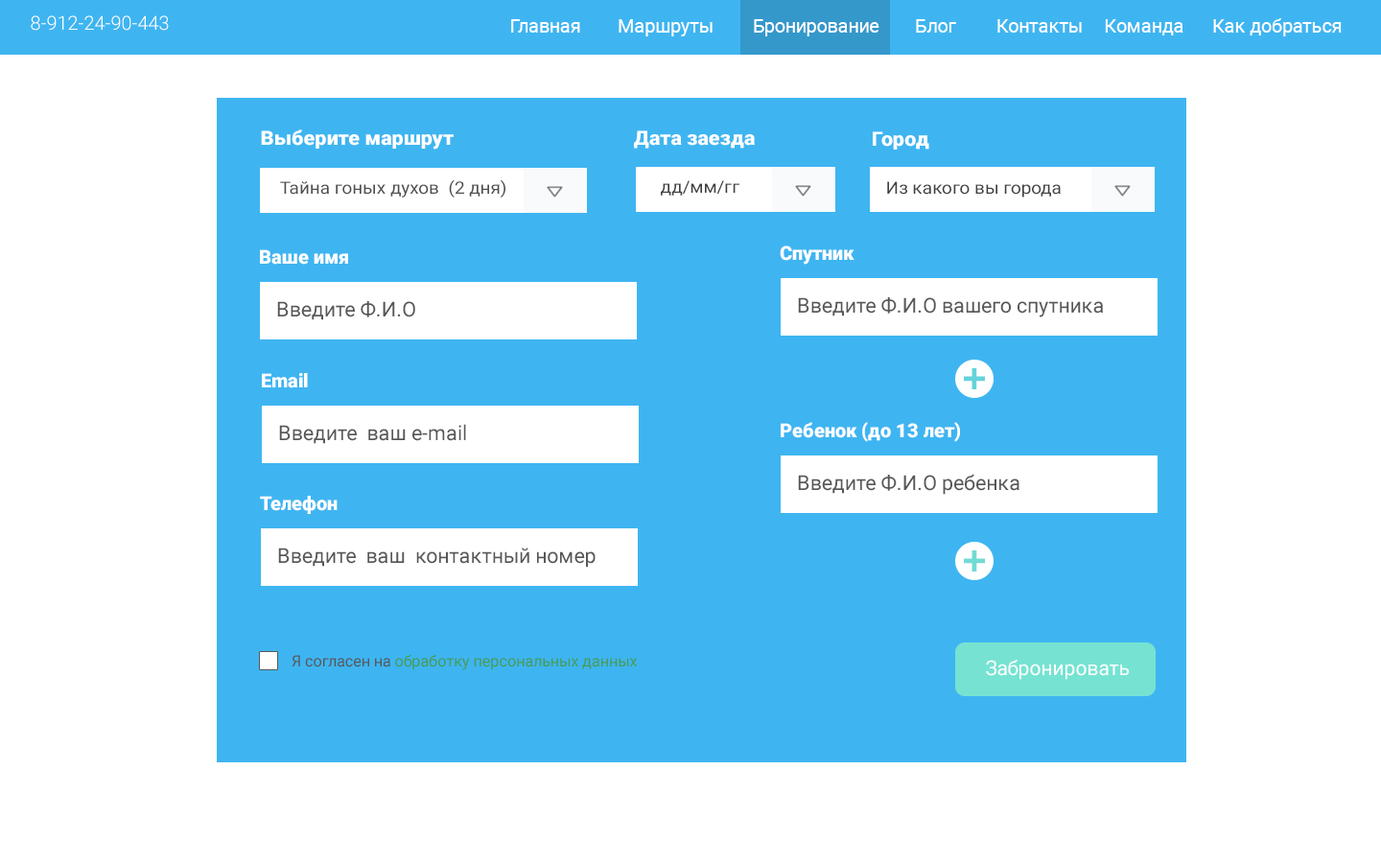
<style>
.page{position:relative;width:1381px;height:863px;background:#ffffff}
.page>*{position:absolute;margin:0}
.t1{font:19.2px "Roboto-Light";color:#ffffff}
.t2{font:18.8px "Roboto-Regular";color:#ffffff}
.t3{font:19.3px "Roboto-Black";color:#ffffff;scale:1.07 1}
.t4{font:16.9px "Roboto-Regular";color:#4d4d4d;scale:1.07 1}
.t5{font:16.9px "Roboto-Regular";color:#3f3f3f;scale:1.07 1}
.t6{font:19.2px "Roboto-Black";color:#ffffff}
.t7{font:20.6px "Roboto-Regular";color:#575757}
.t8{font:15.6px "Roboto-Regular";color:#489b52}
.t9{font:15.6px "Roboto-Regular";color:#575757}
.t10{font:20.1px "Roboto-Regular";color:#ffffff}
</style>
<div class="page">
<p class="t1" style="left:31px;top:15px;width:138px;height:16px">8-912-24-90-443</p>
<p class="t2" style="left:511px;top:18px;width:831px;height:18px">Главная  Маршруты  Бронирование  Блог  Контакты Команда  Как добраться</p>
<p class="t3" style="left:261px;top:129px;width:193px;height:21px">Выберите маршрут</p>
<p class="t3" style="left:634px;top:130px;width:121px;height:19px">Дата заезда</p>
<p class="t3" style="left:873px;top:131px;width:56px;height:19px">Город</p>
<p class="t4" style="left:280px;top:179px;width:226px;height:19px">Тайна гоных духов  (2 дня)</p>
<p class="t5" style="left:661px;top:180px;width:79px;height:16px">дд/мм/гг</p>
<p class="t5" style="left:887px;top:181px;width:174px;height:17px">Из какого вы города</p>
<p class="t6" style="left:780px;top:246px;width:75px;height:19px">Спутник</p>
<p class="t6" style="left:260px;top:249px;width:88px;height:16px">Ваше имя</p>
<p class="t7" style="left:277px;top:301px;width:138px;height:19px">Введите Ф.И.О</p>
<p class="t7" style="left:798px;top:297px;width:305px;height:20px">Введите Ф.И.О вашего спутника</p>
<p class="t6" style="left:262px;top:373px;width:46px;height:15px">Email</p>
<p class="t7" style="left:279px;top:424px;width:187px;height:20px">Введите  ваш e-mail</p>
<p class="t6" style="left:781px;top:422px;width:179px;height:20px">Ребенок (до 13 лет)</p>
<p class="t7" style="left:798px;top:474px;width:222px;height:21px">Введите Ф.И.О ребенка</p>
<p class="t6" style="left:260px;top:496px;width:78px;height:18px">Телефон</p>
<p class="t7" style="left:278px;top:548px;width:318px;height:20px">Введите  ваш  контактный номер</p>
<p class="t8" style="left:292px;top:654px;width:346px;height:16px"><span class="t9">Я согласен на </span>обработку персональных данных</p>
<p class="t10" style="left:986px;top:660px;width:143px;height:20px">Забронировать</p>
</div>
